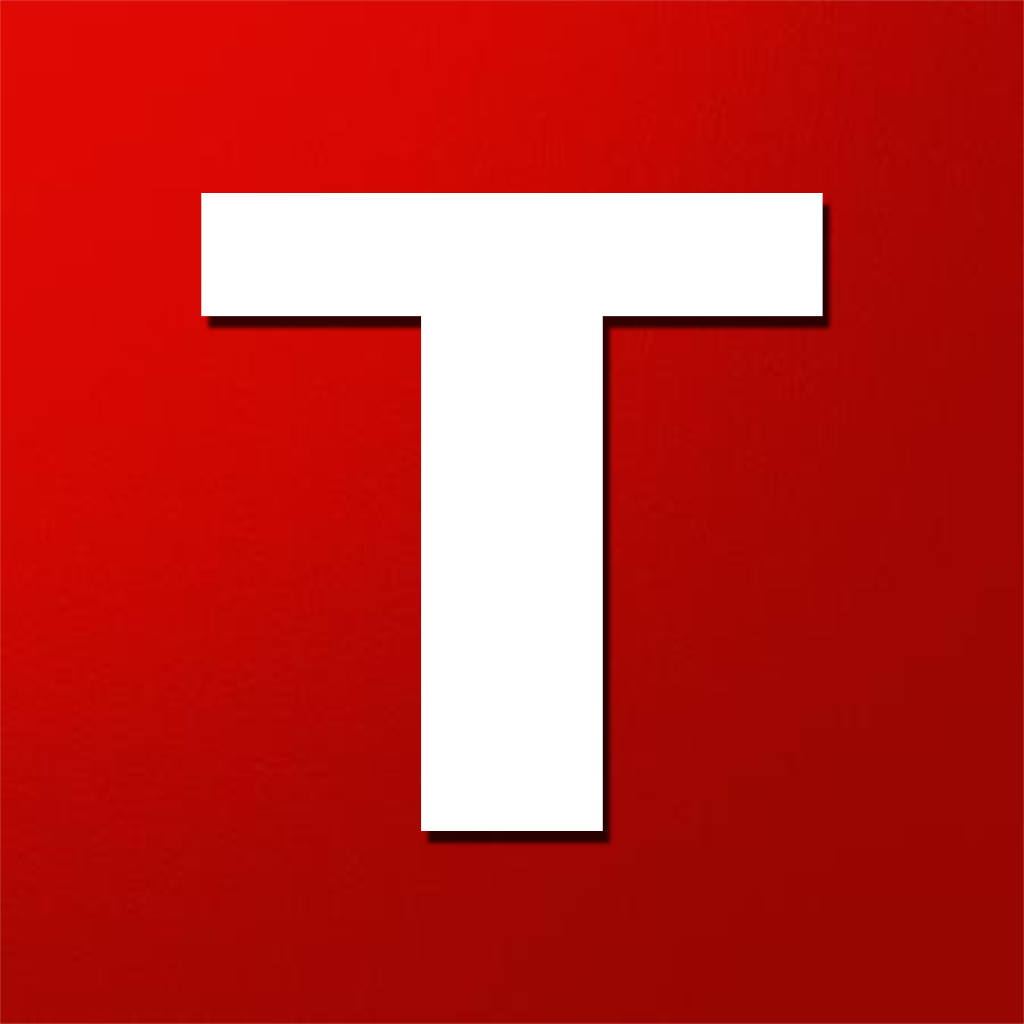
<style>
.page{position:relative;width:1024px;height:1024px}
.page>*{position:absolute;margin:0}
.t1{font:877.7px "Verdana-Bold";color:#ffffff;scale:1.1 1}
</style>
<div class="page">
<p class="t1" style="left:201px;top:193px;width:622px;height:638px">T</p>
</div>
